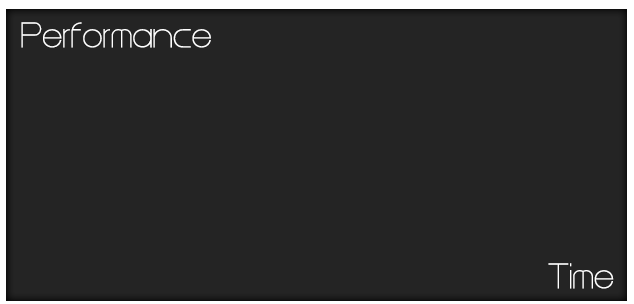
<style>
.page{position:relative;width:634px;height:304px;background:#242424}
.page>*{position:absolute;margin:0}
.t1{font:29.9px "Steiner";color:#ffffff}
</style>
<div class="page">
<p class="t1" style="left:21px;top:22px;width:190px;height:26px">Performance</p>
<p class="t1" style="left:548px;top:263px;width:66px;height:26px">Time</p>
</div>
